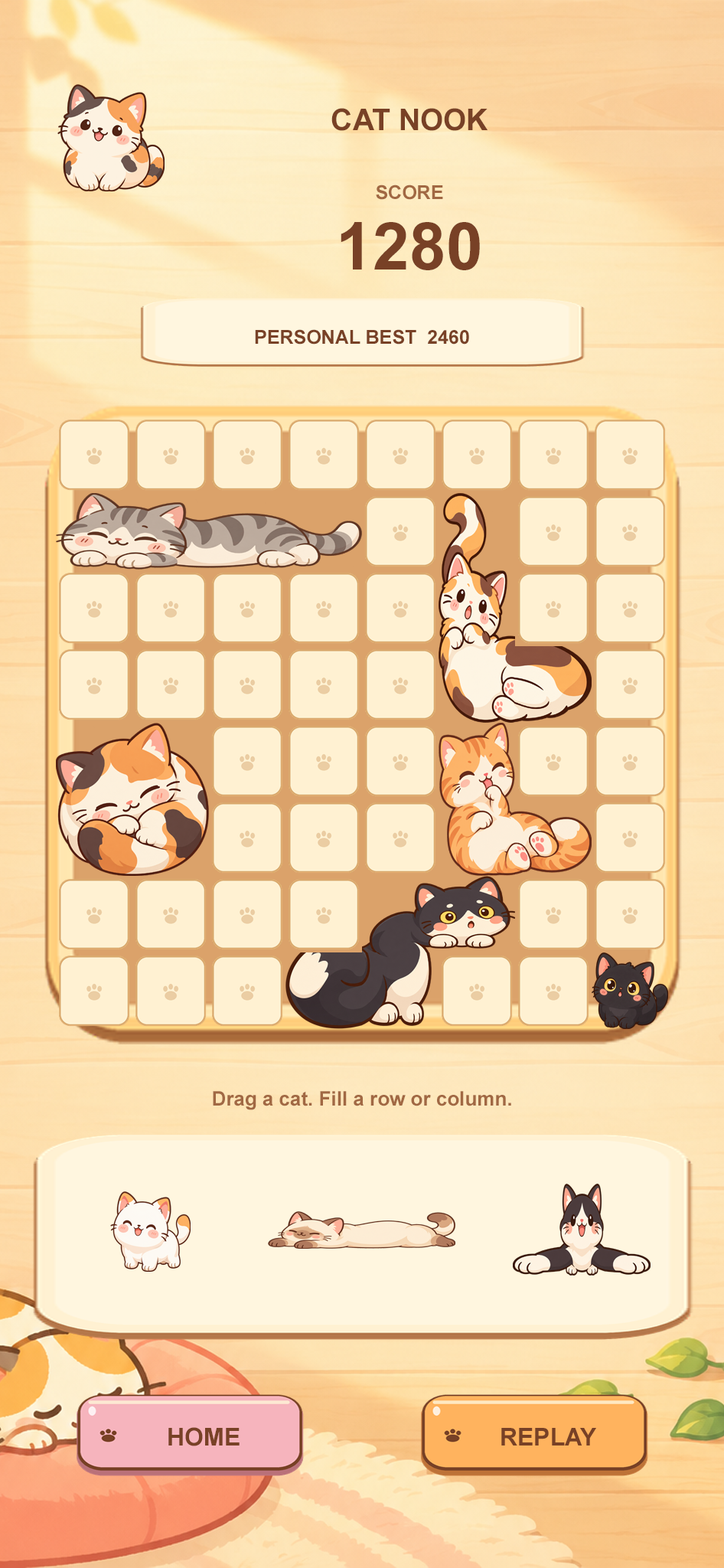
<style>
.page{position:relative;width:724px;height:1568px}
.page>*{position:absolute;margin:0}
.t1{font:29.9px "Arial-BoldMT";color:#784126}
.t2{font:19.1px "Arial-BoldMT";color:#a16843}
.t3{font:65.8px "Arial-BoldMT";color:#784126}
.t4{font:19.1px "Arial-BoldMT";color:#784126}
.t5{font:19.9px "Arial-BoldMT";color:#a16843}
.t6{font:24.5px "Arial-BoldMT";color:#784126}
</style>
<div class="page">
<p class="t1" style="left:332px;top:108px;width:156px;height:23px">CAT NOOK</p>
<p class="t2" style="left:376px;top:185px;width:67px;height:15px">SCORE</p>
<p class="t3" style="left:341px;top:222px;width:139px;height:48px">1280</p>
<p class="t4" style="left:255px;top:329px;width:214px;height:16px">PERSONAL BEST  2460</p>
<p class="t5" style="left:213px;top:1091px;width:298px;height:19px">Drag a cat. Fill a row or column.</p>
<p class="t6" style="left:168px;top:1427px;width:72px;height:19px">HOME</p>
<p class="t6" style="left:501px;top:1428px;width:95px;height:18px">REPLAY</p>
</div>
